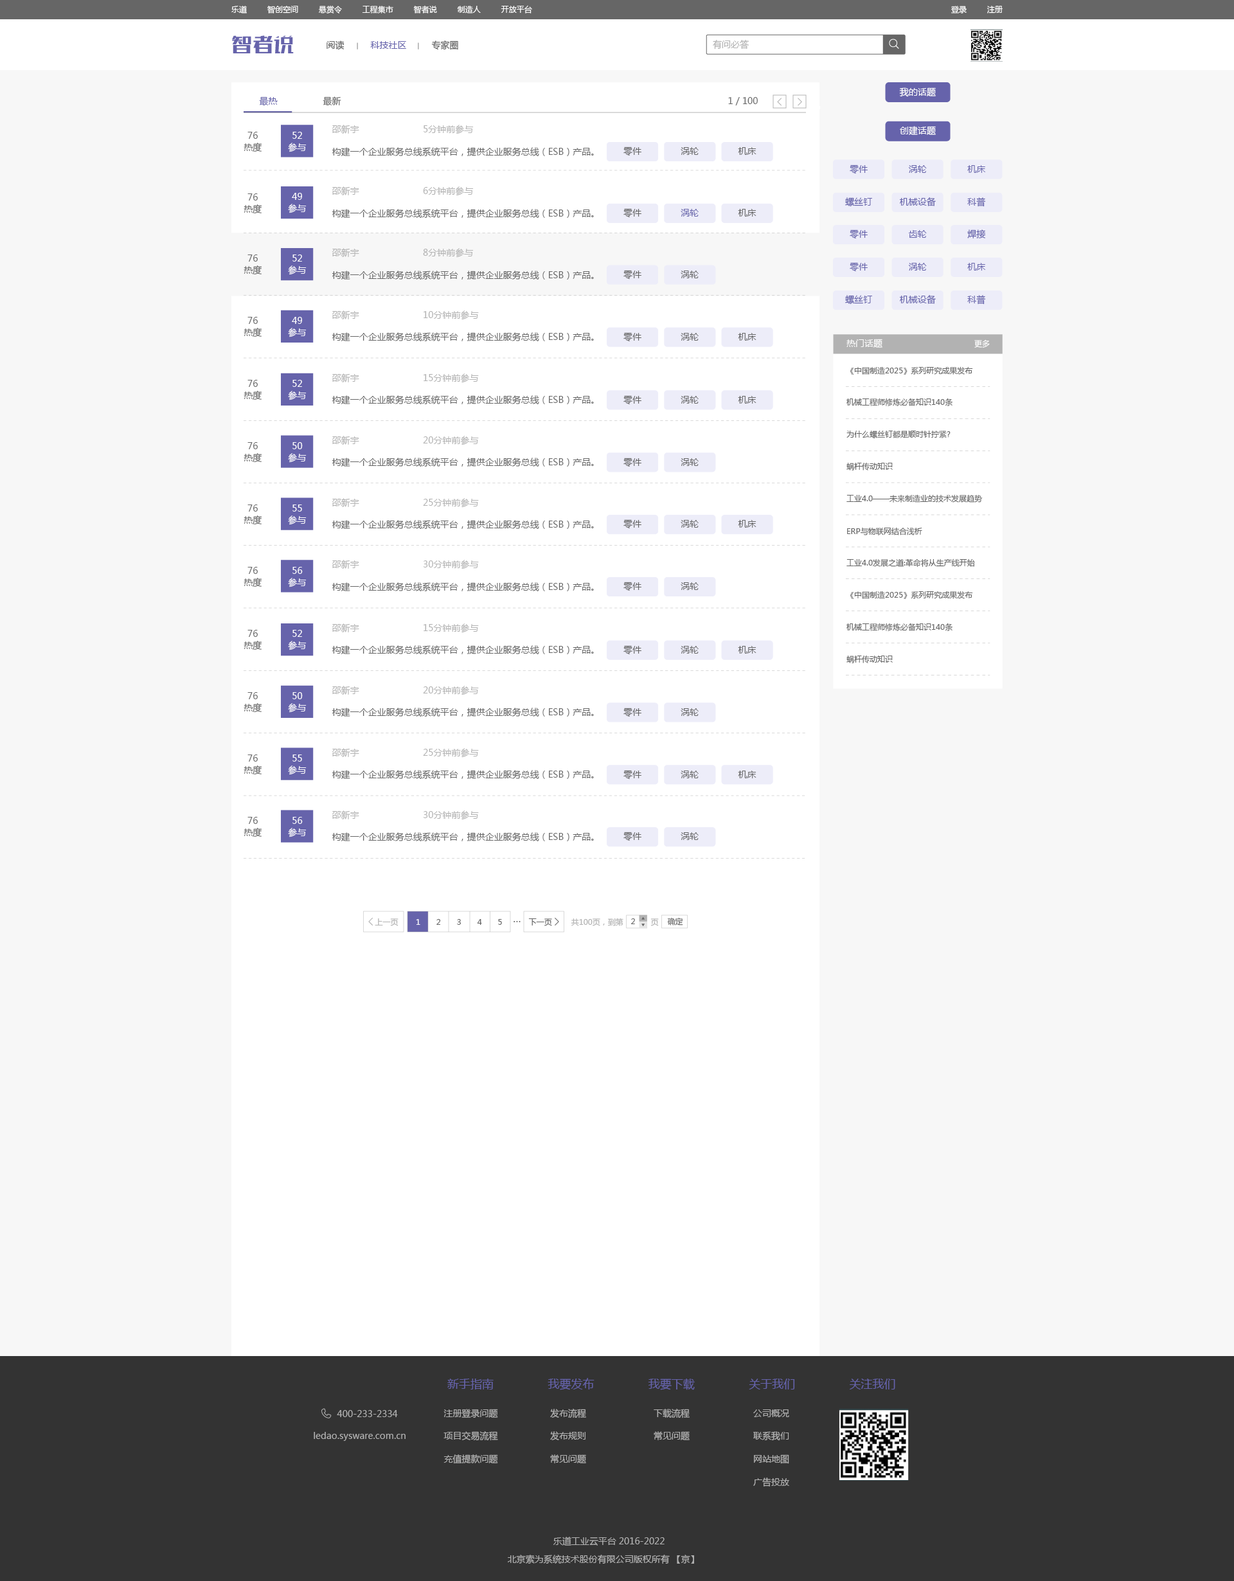
<style>
.page{position:relative;width:1234px;height:1581px;background:#f7f7f7}
.page>*{position:absolute;margin:0}
.t1{font:7.7px "MicrosoftYaHei";color:#ffffff}
.t2{font:19.3px "FZSKJW--GB1-0";color:#6663ab;scale:1.08 1}
.t3{font:9px "MicrosoftYaHei";color:#666666}
.t4{font:9px "MicrosoftYaHei";color:#6663ab}
.t5{font:9px "MicrosoftYaHei";color:#b2b2b2}
.t6{font:9px "MicrosoftYaHei";color:#ffffff}
.t7{font:9px/11.6px "MicrosoftYaHei";color:#666666}
.t8{font:9px/11.6px "MicrosoftYaHei";color:#ffffff}
.t9{font:7.7px "MicrosoftYaHei";color:#666666}
.t10{font:7.7px "MicrosoftYaHei";color:#b2b2b2}
.t11{font:11.6px "MicrosoftYaHei";color:#6663ab}
</style>
<div class="page">
<p class="t1" style="left:231px;top:5px;width:301px;height:9px">乐道         智创空间         悬赏令         工程集市         智者说         制造人         开放平台</p>
<p class="t1" style="left:951px;top:6px;width:52px;height:8px">登录         注册</p>
<p class="t2" style="left:232px;top:35px;width:62px;height:18px">智者说</p>
<p class="t3" style="left:327px;top:40px;width:18px;height:10px">阅读</p>
<p class="t4" style="left:370px;top:41px;width:36px;height:8px">科技社区</p>
<p class="t3" style="left:431px;top:40px;width:27px;height:10px">专家圈</p>
<p class="t5" style="left:713px;top:40px;width:36px;height:10px">有问必答</p>
<p class="t6" style="left:899px;top:87px;width:37px;height:10px">我的话题</p>
<p class="t4" style="left:259px;top:96px;width:19px;height:10px">最热</p>
<p class="t3" style="left:323px;top:96px;width:18px;height:10px">最新</p>
<p class="t3" style="left:728px;top:97px;width:30px;height:8px">1 / 100</p>
<p class="t5" style="left:332px;top:125px;width:142px;height:9px">邵新宇                        5分钟前参与</p>
<p class="t7" style="left:244px;top:132px;width:18px;height:20px">76<br>热度</p>
<p class="t8" style="left:288px;top:132px;width:19px;height:20px">52<br>参与</p>
<p class="t6" style="left:900px;top:126px;width:36px;height:9px">创建话题</p>
<p class="t3" style="left:332px;top:147px;width:262px;height:9px">构建一个企业服务总线系统平台，提供企业服务总线（ESB）产品。</p>
<p class="t3" style="left:624px;top:147px;width:18px;height:9px">零件</p>
<p class="t3" style="left:681px;top:147px;width:18px;height:8px">涡轮</p>
<p class="t3" style="left:738px;top:147px;width:19px;height:8px">机床</p>
<p class="t4" style="left:850px;top:165px;width:18px;height:9px">零件</p>
<p class="t4" style="left:908px;top:165px;width:19px;height:8px">涡轮</p>
<p class="t4" style="left:968px;top:165px;width:18px;height:8px">机床</p>
<p class="t7" style="left:244px;top:194px;width:18px;height:20px">76<br>热度</p>
<p class="t8" style="left:288px;top:193px;width:19px;height:20px">49<br>参与</p>
<p class="t5" style="left:332px;top:186px;width:142px;height:10px">邵新宇                        6分钟前参与</p>
<p class="t4" style="left:845px;top:197px;width:27px;height:9px">螺丝钉</p>
<p class="t4" style="left:899px;top:197px;width:37px;height:9px">机械设备</p>
<p class="t4" style="left:968px;top:197px;width:18px;height:10px">科普</p>
<p class="t3" style="left:332px;top:209px;width:262px;height:9px">构建一个企业服务总线系统平台，提供企业服务总线（ESB）产品。</p>
<p class="t3" style="left:624px;top:208px;width:18px;height:10px">零件</p>
<p class="t4" style="left:681px;top:209px;width:18px;height:8px">涡轮</p>
<p class="t3" style="left:738px;top:209px;width:19px;height:8px">机床</p>
<p class="t4" style="left:850px;top:230px;width:18px;height:9px">零件</p>
<p class="t4" style="left:908px;top:230px;width:19px;height:8px">齿轮</p>
<p class="t4" style="left:968px;top:230px;width:18px;height:9px">焊接</p>
<p class="t7" style="left:244px;top:255px;width:18px;height:20px">76<br>热度</p>
<p class="t8" style="left:288px;top:255px;width:19px;height:20px">52<br>参与</p>
<p class="t5" style="left:332px;top:248px;width:142px;height:10px">邵新宇                        8分钟前参与</p>
<p class="t3" style="left:624px;top:270px;width:18px;height:10px">零件</p>
<p class="t4" style="left:850px;top:262px;width:18px;height:10px">零件</p>
<p class="t4" style="left:908px;top:263px;width:19px;height:8px">涡轮</p>
<p class="t4" style="left:968px;top:263px;width:18px;height:8px">机床</p>
<p class="t3" style="left:332px;top:271px;width:262px;height:9px">构建一个企业服务总线系统平台，提供企业服务总线（ESB）产品。</p>
<p class="t3" style="left:681px;top:271px;width:18px;height:7px">涡轮</p>
<p class="t4" style="left:845px;top:295px;width:27px;height:9px">螺丝钉</p>
<p class="t4" style="left:899px;top:295px;width:37px;height:9px">机械设备</p>
<p class="t4" style="left:968px;top:295px;width:18px;height:10px">科普</p>
<p class="t7" style="left:244px;top:317px;width:18px;height:21px">76<br>热度</p>
<p class="t8" style="left:288px;top:317px;width:19px;height:21px">49<br>参与</p>
<p class="t5" style="left:332px;top:310px;width:147px;height:10px">邵新宇                        10分钟前参与</p>
<p class="t3" style="left:332px;top:332px;width:262px;height:9px">构建一个企业服务总线系统平台，提供企业服务总线（ESB）产品。</p>
<p class="t3" style="left:624px;top:332px;width:18px;height:10px">零件</p>
<p class="t3" style="left:681px;top:333px;width:18px;height:8px">涡轮</p>
<p class="t3" style="left:738px;top:333px;width:19px;height:8px">机床</p>
<p class="t6" style="left:847px;top:339px;width:36px;height:9px">热门话题</p>
<p class="t1" style="left:975px;top:339px;width:15px;height:9px">更多</p>
<p class="t5" style="left:332px;top:374px;width:147px;height:9px">邵新宇                        15分钟前参与</p>
<p class="t9" style="left:850px;top:366px;width:123px;height:9px">《中国制造2025》系列研究成果发布</p>
<p class="t7" style="left:244px;top:380px;width:18px;height:21px">76<br>热度</p>
<p class="t8" style="left:288px;top:380px;width:19px;height:21px">52<br>参与</p>
<p class="t3" style="left:332px;top:395px;width:262px;height:9px">构建一个企业服务总线系统平台，提供企业服务总线（ESB）产品。</p>
<p class="t3" style="left:624px;top:395px;width:18px;height:10px">零件</p>
<p class="t3" style="left:681px;top:396px;width:18px;height:8px">涡轮</p>
<p class="t3" style="left:738px;top:396px;width:19px;height:8px">机床</p>
<p class="t9" style="left:847px;top:398px;width:106px;height:8px">机械工程师修炼必备知识140条</p>
<p class="t5" style="left:332px;top:436px;width:147px;height:10px">邵新宇                        20分钟前参与</p>
<p class="t9" style="left:847px;top:430px;width:104px;height:8px">为什么螺丝钉都是顺时针拧紧?</p>
<p class="t7" style="left:244px;top:442px;width:18px;height:21px">76<br>热度</p>
<p class="t8" style="left:288px;top:442px;width:19px;height:21px">50<br>参与</p>
<p class="t3" style="left:332px;top:458px;width:262px;height:9px">构建一个企业服务总线系统平台，提供企业服务总线（ESB）产品。</p>
<p class="t3" style="left:624px;top:458px;width:18px;height:9px">零件</p>
<p class="t3" style="left:681px;top:458px;width:18px;height:8px">涡轮</p>
<p class="t9" style="left:847px;top:462px;width:46px;height:9px">蜗杆传动知识</p>
<p class="t9" style="left:847px;top:494px;width:135px;height:9px">工业4.0——未来制造业的技术发展趋势</p>
<p class="t7" style="left:244px;top:505px;width:18px;height:20px">76<br>热度</p>
<p class="t8" style="left:288px;top:505px;width:19px;height:20px">55<br>参与</p>
<p class="t5" style="left:332px;top:498px;width:147px;height:10px">邵新宇                        25分钟前参与</p>
<p class="t3" style="left:332px;top:520px;width:262px;height:9px">构建一个企业服务总线系统平台，提供企业服务总线（ESB）产品。</p>
<p class="t3" style="left:624px;top:519px;width:18px;height:10px">零件</p>
<p class="t3" style="left:681px;top:520px;width:18px;height:8px">涡轮</p>
<p class="t3" style="left:738px;top:520px;width:19px;height:8px">机床</p>
<p class="t9" style="left:847px;top:527px;width:76px;height:9px">ERP与物联网结合浅析</p>
<p class="t7" style="left:244px;top:567px;width:18px;height:21px">76<br>热度</p>
<p class="t8" style="left:288px;top:567px;width:19px;height:21px">56<br>参与</p>
<p class="t5" style="left:332px;top:560px;width:147px;height:10px">邵新宇                        30分钟前参与</p>
<p class="t9" style="left:847px;top:559px;width:128px;height:8px">工业4.0发展之道:革命将从生产线开始</p>
<p class="t3" style="left:624px;top:582px;width:18px;height:9px">零件</p>
<p class="t3" style="left:332px;top:582px;width:262px;height:9px">构建一个企业服务总线系统平台，提供企业服务总线（ESB）产品。</p>
<p class="t3" style="left:681px;top:582px;width:18px;height:8px">涡轮</p>
<p class="t9" style="left:850px;top:591px;width:123px;height:8px">《中国制造2025》系列研究成果发布</p>
<p class="t7" style="left:244px;top:630px;width:18px;height:21px">76<br>热度</p>
<p class="t8" style="left:288px;top:630px;width:19px;height:21px">52<br>参与</p>
<p class="t5" style="left:332px;top:624px;width:147px;height:9px">邵新宇                        15分钟前参与</p>
<p class="t9" style="left:847px;top:623px;width:106px;height:8px">机械工程师修炼必备知识140条</p>
<p class="t3" style="left:332px;top:645px;width:262px;height:9px">构建一个企业服务总线系统平台，提供企业服务总线（ESB）产品。</p>
<p class="t3" style="left:624px;top:645px;width:18px;height:10px">零件</p>
<p class="t3" style="left:681px;top:646px;width:18px;height:8px">涡轮</p>
<p class="t3" style="left:738px;top:646px;width:19px;height:8px">机床</p>
<p class="t9" style="left:847px;top:655px;width:46px;height:8px">蜗杆传动知识</p>
<p class="t5" style="left:332px;top:686px;width:147px;height:10px">邵新宇                        20分钟前参与</p>
<p class="t7" style="left:244px;top:692px;width:18px;height:21px">76<br>热度</p>
<p class="t8" style="left:288px;top:692px;width:19px;height:21px">50<br>参与</p>
<p class="t3" style="left:332px;top:708px;width:262px;height:9px">构建一个企业服务总线系统平台，提供企业服务总线（ESB）产品。</p>
<p class="t3" style="left:624px;top:708px;width:18px;height:9px">零件</p>
<p class="t3" style="left:681px;top:708px;width:18px;height:8px">涡轮</p>
<p class="t5" style="left:332px;top:748px;width:147px;height:10px">邵新宇                        25分钟前参与</p>
<p class="t7" style="left:244px;top:755px;width:18px;height:20px">76<br>热度</p>
<p class="t8" style="left:288px;top:755px;width:19px;height:20px">55<br>参与</p>
<p class="t3" style="left:332px;top:770px;width:262px;height:9px">构建一个企业服务总线系统平台，提供企业服务总线（ESB）产品。</p>
<p class="t3" style="left:624px;top:770px;width:18px;height:10px">零件</p>
<p class="t3" style="left:681px;top:771px;width:18px;height:8px">涡轮</p>
<p class="t3" style="left:738px;top:771px;width:19px;height:8px">机床</p>
<p class="t7" style="left:244px;top:817px;width:18px;height:21px">76<br>热度</p>
<p class="t8" style="left:288px;top:817px;width:19px;height:21px">56<br>参与</p>
<p class="t5" style="left:332px;top:811px;width:147px;height:9px">邵新宇                        30分钟前参与</p>
<p class="t3" style="left:332px;top:833px;width:262px;height:9px">构建一个企业服务总线系统平台，提供企业服务总线（ESB）产品。</p>
<p class="t3" style="left:624px;top:832px;width:18px;height:10px">零件</p>
<p class="t3" style="left:681px;top:833px;width:18px;height:7px">涡轮</p>
<p class="t9" style="left:667px;top:917px;width:16px;height:9px">确定</p>
<p class="t10" style="left:375px;top:919px;width:24px;height:7px">上一页</p>
<p class="t1" style="left:416px;top:919px;width:4px;height:6px">1</p>
<p class="t9" style="left:437px;top:919px;width:4px;height:6px">2</p>
<p class="t9" style="left:457px;top:919px;width:4px;height:6px">3</p>
<p class="t9" style="left:477px;top:919px;width:5px;height:6px">4</p>
<p class="t9" style="left:498px;top:919px;width:4px;height:6px">5</p>
<p class="t9" style="left:528px;top:919px;width:24px;height:7px">下一页</p>
<p class="t10" style="left:571px;top:918px;width:88px;height:8px">共100页，到第            页</p>
<p class="t9" style="left:631px;top:919px;width:4px;height:5px">2</p>
<p class="t11" style="left:447px;top:1379px;width:47px;height:11px">新手指南</p>
<p class="t11" style="left:548px;top:1378px;width:47px;height:12px">我要发布</p>
<p class="t11" style="left:648px;top:1379px;width:47px;height:11px">我要下载</p>
<p class="t11" style="left:749px;top:1379px;width:46px;height:11px">关于我们</p>
<p class="t11" style="left:849px;top:1379px;width:47px;height:11px">关注我们</p>
<p class="t5" style="left:444px;top:1409px;width:54px;height:9px">注册登录问题</p>
<p class="t5" style="left:550px;top:1409px;width:36px;height:10px">发布流程</p>
<p class="t5" style="left:654px;top:1409px;width:36px;height:10px">下载流程</p>
<p class="t5" style="left:753px;top:1410px;width:36px;height:8px">公司概况</p>
<p class="t5" style="left:337px;top:1410px;width:61px;height:8px">400-233-2334</p>
<p class="t5" style="left:314px;top:1432px;width:92px;height:9px">ledao.sysware.com.cn</p>
<p class="t5" style="left:444px;top:1432px;width:54px;height:9px">项目交易流程</p>
<p class="t5" style="left:550px;top:1432px;width:36px;height:9px">发布规则</p>
<p class="t5" style="left:654px;top:1432px;width:36px;height:9px">常见问题</p>
<p class="t5" style="left:753px;top:1432px;width:36px;height:9px">联系我们</p>
<p class="t5" style="left:444px;top:1455px;width:54px;height:9px">充值提款问题</p>
<p class="t5" style="left:550px;top:1455px;width:36px;height:9px">常见问题</p>
<p class="t5" style="left:754px;top:1455px;width:35px;height:9px">网站地图</p>
<p class="t5" style="left:753px;top:1478px;width:36px;height:9px">广告投放</p>
<p class="t5" style="left:554px;top:1537px;width:111px;height:9px">乐道工业云平台 2016-2022</p>
<p class="t5" style="left:508px;top:1555px;width:186px;height:10px">北京索为系统技术股份有限公司版权所有 【京】</p>
</div>
